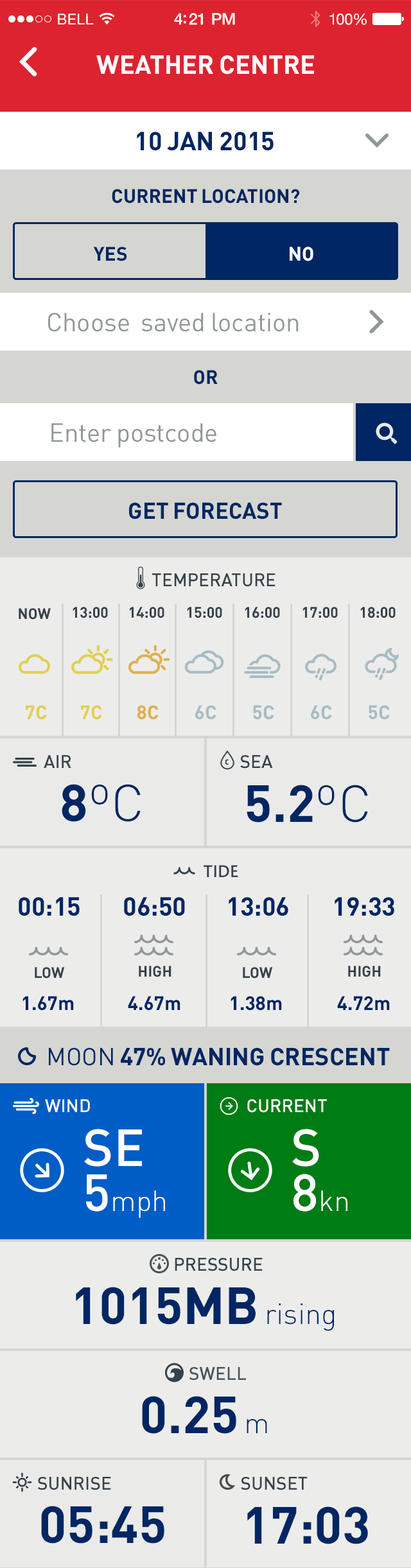
<style>
.page{position:relative;width:411px;height:1568px;background:#ecedeb}
.page>*{position:absolute;margin:0}
.t1{font:14.8px "HelveticaNeue";letter-spacing:0.02em;color:#ffffff}
.t2{font:16.1px "HelveticaNeue-Medium";letter-spacing:-0.02em;color:#ffffff}
.t3{font:15.4px "HelveticaNeue";letter-spacing:-0.02em;color:#ffffff}
.t4{font:25.7px "DIN-Bold";color:#ffffff;text-transform:uppercase}
.t5{font:25.7px "DIN-Bold";color:#002663;text-transform:uppercase}
.t6{font:19.3px "DIN-Bold";color:#002663;text-transform:uppercase}
.t7{font:19.3px "DIN-Bold";color:#002663}
.t8{font:19.3px "DIN-Bold";color:#ffffff}
.t9{font:25.7px "DIN-Regular";color:#91979a}
.t10{font:22.5px "DIN-Bold";color:#002663;text-transform:uppercase}
.t11{font:18px "DIN-Medium";color:#36424a;text-transform:uppercase}
.t12{font:14.9px "DIN-Bold";color:#36424a;text-transform:uppercase}
.t13{font:19.3px "DIN-Bold";color:#e0cf54}
.t14{font:19.3px "DIN-Bold";color:#dfaf4d}
.t15{font:19.3px "DIN-Bold";color:#a8bcc2}
.t16{font:7.7px "DIN-BlackAlternate";color:#36424a;text-transform:uppercase}
.t17{font:51.4px "DIN-Light";color:#002663}
.t18{font:51.4px "DIN-Bold";color:#002663;text-transform:uppercase}
.t19{font:18px "Bliss2-Medium";color:#36424a;text-transform:uppercase}
.t20{font:24.2px "DIN-Bold";color:#002663;text-transform:uppercase}
.t21{font:24.2px "DIN-Regular";color:#002663;text-transform:uppercase}
.t22{font:18px "DIN-Medium";color:#ffffff;text-transform:uppercase}
.t23{font:28.9px/44.9px "DIN-Light";color:#ffffff}
.t24{font:51.4px/81.5px "DIN-Medium";color:#ffffff;text-transform:uppercase}
.t25{font:51.4px/44.9px "DIN-Medium";color:#ffffff}
.t26{font:28.9px "DIN-Light";color:#002663}
.t27{font:18px "DIN-Medium";color:#48535a;text-transform:uppercase}
</style>
<div class="page">
<p class="t1" style="left:58px;top:13px;width:36px;height:11px">BELL</p>
<p class="t2" style="left:174px;top:13px;width:61px;height:12px">4:21 PM</p>
<p class="t3" style="left:329px;top:13px;width:38px;height:12px">100%</p>
<p class="t4" style="left:96px;top:55px;width:218px;height:19px">weather centre</p>
<p class="t5" style="left:137px;top:132px;width:137px;height:19px">10 Jan 2015</p>
<p class="t6" style="left:112px;top:189px;width:188px;height:15px">Current location?</p>
<p class="t7" style="left:93px;top:247px;width:34px;height:14px">YES</p>
<p class="t8" style="left:290px;top:247px;width:23px;height:14px">NO</p>
<p class="t9" style="left:48px;top:313px;width:251px;height:19px">Choose  saved location</p>
<p class="t6" style="left:194px;top:370px;width:24px;height:15px">OR</p>
<p class="t9" style="left:51px;top:423px;width:165px;height:25px">Enter postcode</p>
<p class="t10" style="left:129px;top:502px;width:153px;height:17px">get forecast</p>
<p class="t11" style="left:152px;top:573px;width:123px;height:14px">temperature</p>
<p class="t12" style="left:19px;top:608px;width:32px;height:12px">NOW</p>
<p class="t12" style="left:73px;top:607px;width:35px;height:11px">13:00</p>
<p class="t12" style="left:129px;top:607px;width:35px;height:11px">14:00</p>
<p class="t12" style="left:187px;top:607px;width:35px;height:11px">15:00</p>
<p class="t12" style="left:245px;top:607px;width:35px;height:11px">16:00</p>
<p class="t12" style="left:302px;top:607px;width:36px;height:11px">17:00</p>
<p class="t12" style="left:360px;top:607px;width:36px;height:11px">18:00</p>
<p class="t13" style="left:26px;top:705px;width:21px;height:15px">7C</p>
<p class="t13" style="left:81px;top:705px;width:21px;height:15px">7C</p>
<p class="t14" style="left:137px;top:705px;width:22px;height:15px">8C</p>
<p class="t15" style="left:195px;top:705px;width:21px;height:15px">6C</p>
<p class="t15" style="left:253px;top:705px;width:21px;height:15px">5C</p>
<p class="t15" style="left:311px;top:705px;width:21px;height:15px">6C</p>
<p class="t15" style="left:369px;top:705px;width:21px;height:15px">5C</p>
<p class="t11" style="left:44px;top:755px;width:27px;height:13px">air</p>
<p class="t16" style="left:225px;top:759px;width:4px;height:6px">C</p>
<p class="t11" style="left:240px;top:755px;width:33px;height:14px">sea</p>
<p class="t17" style="left:62px;top:784px;width:79px;height:38px"><span class="t18">8</span>ºC</p>
<p class="t18" style="left:247px;top:785px;width:121px;height:38px">5.2<span class="t17">ºC</span></p>
<p class="t19" style="left:204px;top:865px;width:34px;height:12px">tide</p>
<p class="t5" style="left:19px;top:897px;width:61px;height:19px">00:15</p>
<p class="t5" style="left:124px;top:897px;width:61px;height:19px">06:50</p>
<p class="t5" style="left:229px;top:897px;width:59px;height:19px">13:06</p>
<p class="t5" style="left:335px;top:897px;width:59px;height:19px">19:33</p>
<p class="t12" style="left:139px;top:966px;width:32px;height:11px">high</p>
<p class="t12" style="left:348px;top:966px;width:33px;height:11px">high</p>
<p class="t12" style="left:35px;top:967px;width:30px;height:12px">LOW</p>
<p class="t12" style="left:243px;top:967px;width:30px;height:12px">LOW</p>
<p class="t7" style="left:22px;top:996px;width:52px;height:15px">1.67m</p>
<p class="t7" style="left:128px;top:996px;width:52px;height:15px">4.67m</p>
<p class="t7" style="left:231px;top:996px;width:51px;height:15px">1.38m</p>
<p class="t7" style="left:337px;top:996px;width:53px;height:14px">4.72m</p>
<p class="t20" style="left:49px;top:1048px;width:341px;height:18px"><span class="t21">Moon </span>47% waning crescent</p>
<p class="t22" style="left:45px;top:1099px;width:45px;height:13px">WIND</p>
<p class="t22" style="left:247px;top:1099px;width:80px;height:14px">CUrrent</p>
<p class="t23" style="left:84px;top:1129px;width:81px;height:89px"><span class="t24">SE<br></span><span class="t25">5</span>mph</p>
<p class="t23" style="left:292px;top:1129px;width:55px;height:83px"><span class="t24">S<br></span><span class="t25">8</span>kn</p>
<p class="t11" style="left:175px;top:1258px;width:88px;height:13px">pressure</p>
<p class="t18" style="left:76px;top:1287px;width:258px;height:44px">1015mb<span class="t26"> rising</span></p>
<p class="t27" style="left:189px;top:1367px;width:57px;height:14px">swell</p>
<p class="t18" style="left:142px;top:1396px;width:125px;height:38px">0.25<span class="t26"> m</span></p>
<p class="t11" style="left:37px;top:1477px;width:74px;height:13px">sunrise</p>
<p class="t11" style="left:241px;top:1477px;width:67px;height:13px">sunset</p>
<p class="t18" style="left:41px;top:1506px;width:123px;height:38px">05:45</p>
<p class="t18" style="left:247px;top:1506px;width:121px;height:38px">17:03</p>
</div>
